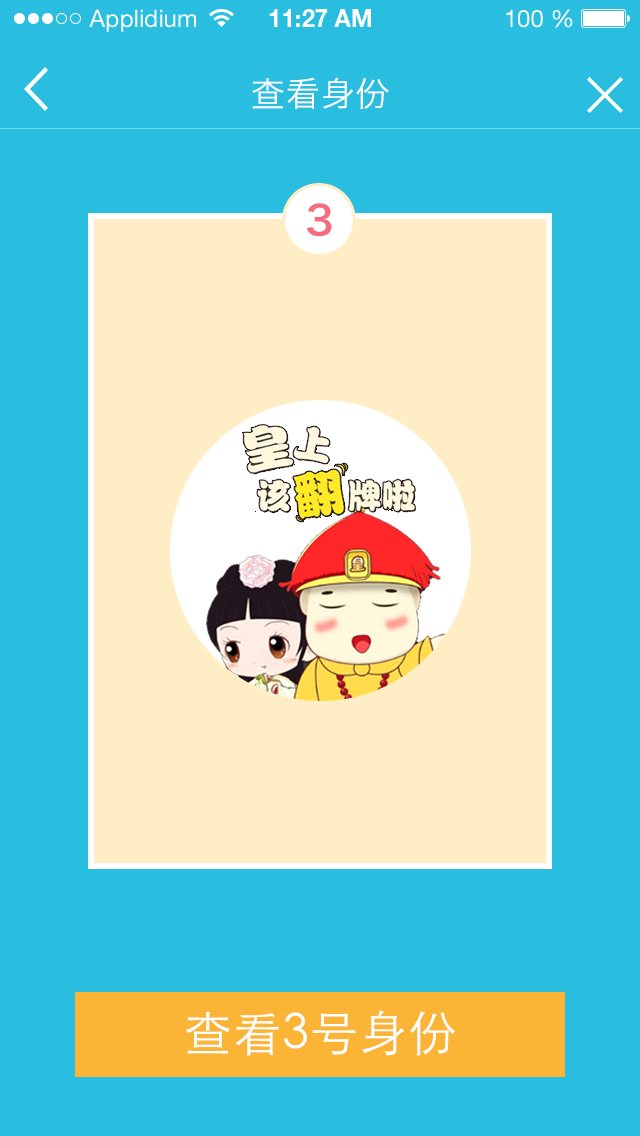
<style>
.page{position:relative;width:640px;height:1136px;background:#29bde0}
.page>*{position:absolute;margin:0}
.t1{font:34px "HiraginoSansGB-W3";letter-spacing:0.025em;color:#ffffff}
.t2{font:40px "HiraginoSansGB-W6";letter-spacing:0.025em;color:#f56b81}
.t3{font:48px "STHeitiSC-Light";letter-spacing:0.025em;color:#ffffff}
</style>
<div class="page">
<p class="t1" style="left:252px;top:77px;width:137px;height:32px">查看身份</p>
<p class="t2" style="left:306px;top:203px;width:26px;height:34px">3</p>
<p class="t3" style="left:185px;top:1010px;width:270px;height:46px">查看3号身份</p>
</div>
